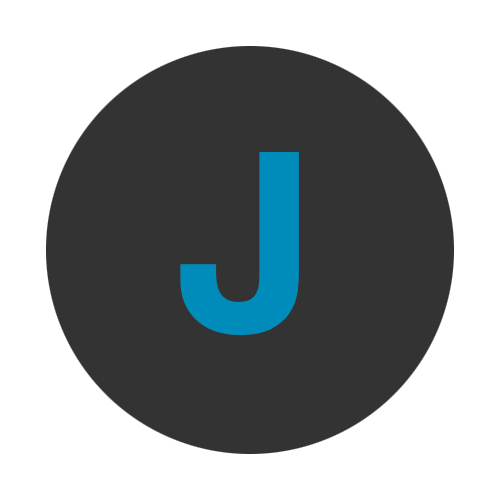
<style>
.page{position:relative;width:500px;height:500px;background:#333333}
.page>*{position:absolute;margin:0}
.t1{font:250px "HelveticaNeue-Bold";color:#008cba}
</style>
<div class="page">
<p class="t1" style="left:180px;top:152px;width:119px;height:183px">J</p>
</div>
